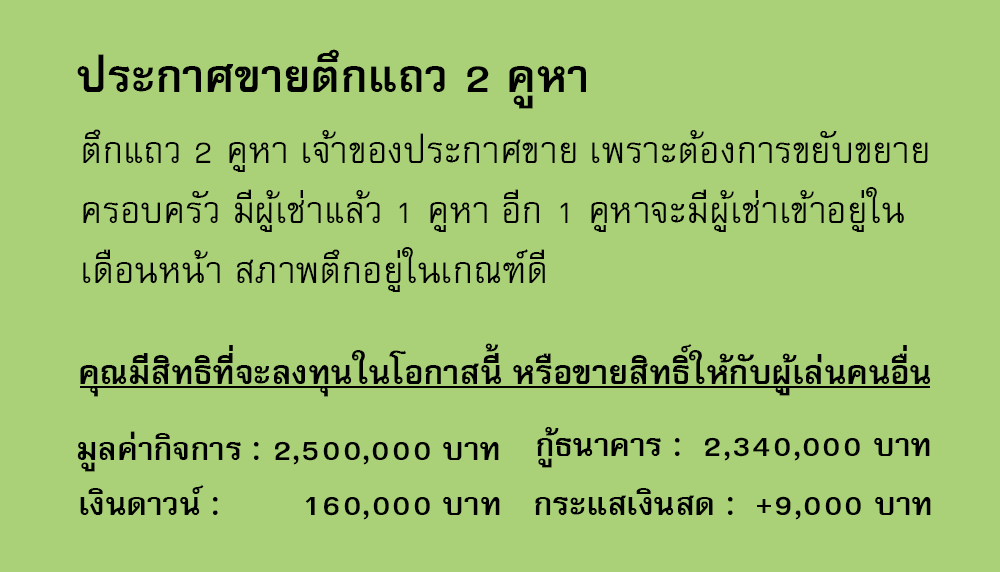
<style>
.page{position:relative;width:1000px;height:572px;background:#aad178}
.page>*{position:absolute;margin:0}
.t1{font:64px "FreesiaUPCBold";color:#000000}
.t2{font:51px/60px "FreesiaUPC";color:#000000}
.t3{font:47px "FreesiaUPCBold";color:#000000}
.t4{font:45px "FreesiaUPCBold";color:#000000}
</style>
<div class="page">
<p class="t1" style="left:77px;top:49px;width:509px;height:60px">ประกาศขายตึกแถว 2 คูหา</p>
<p class="t2" style="left:83px;top:129px;width:845px;height:163px">ตึกแถว 2 คูหา เจ้าของประกาศขาย เพราะต้องการขยับขยาย<br>ครอบครัว มีผู้เช่าแล้ว 1 คูหา อีก 1 คูหาจะมีผู้เช่าเข้าอยู่ใน<br>เดือนหน้า สภาพตึกอยู่ในเกณฑ์ดี</p>
<p class="t3" style="left:80px;top:343px;width:851px;height:54px">คุณมีสิทธิที่จะลงทุนในโอกาสนี้ หรือขายสิทธิ์ให้กับผู้เล่นคนอื่น</p>
<p class="t4" style="left:77px;top:431px;width:422px;height:41px">มูลค่ากิจการ : 2,500,000 บาท</p>
<p class="t4" style="left:537px;top:427px;width:393px;height:41px">กู้ธนาคาร :  2,340,000 บาท</p>
<p class="t4" style="left:80px;top:484px;width:420px;height:36px">เงินดาวน์ :        160,000 บาท</p>
<p class="t4" style="left:535px;top:488px;width:396px;height:32px">กระแสเงินสด :  +9,000 บาท</p>
</div>
